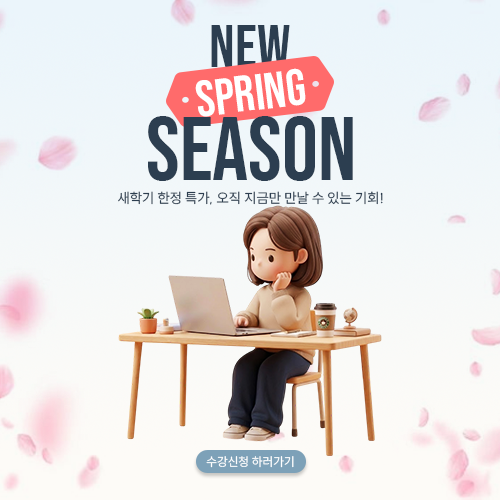
<style>
.page{position:relative;width:500px;height:500px}
.page>*{position:absolute;margin:0}
.t1{font:60px "BebasNeue-Regular";color:#2c3e50;text-transform:uppercase}
.t2{font:50.9px "BebasNeue-Regular";color:#ffffff;text-transform:uppercase}
.t3{font:90px "BebasNeue-Regular";color:#2c3e50;text-transform:uppercase}
.t4{font:14px "SUIT-Regular";color:#2c3e50;text-transform:uppercase}
.t5{font:12.2px "SUIT-Regular";color:#ffffff;text-transform:uppercase}
</style>
<div class="page">
<p class="t1" style="left:211px;top:25px;width:79px;height:42px">NEW</p>
<p class="t2" style="left:195px;top:68px;width:111px;height:49px;rotate:-7deg">SPRING</p>
<p class="t3" style="left:148px;top:116px;width:205px;height:65px">SEASON</p>
<p class="t4" style="left:118px;top:191px;width:265px;height:14px">새학기 한정 특가, 오직 지금만 만날 수 있는 기회!</p>
<p class="t5" style="left:206px;top:456px;width:88px;height:12px">수강신청 하러가기</p>
</div>
